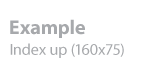
<style>
.page{position:relative;width:160px;height:75px;background:#ffffff}
.page>*{position:absolute;margin:0}
.t1{font:20px "MyriadPro-Bold";color:#a7a9ac}
.t2{font:16px "MyriadPro-Regular";color:#a7a9ac}
</style>
<div class="page">
<p class="t1" style="left:10px;top:19px;width:75px;height:19px">Example</p>
<p class="t2" style="left:10px;top:43px;width:114px;height:15px">Index up (160x75)</p>
</div>
